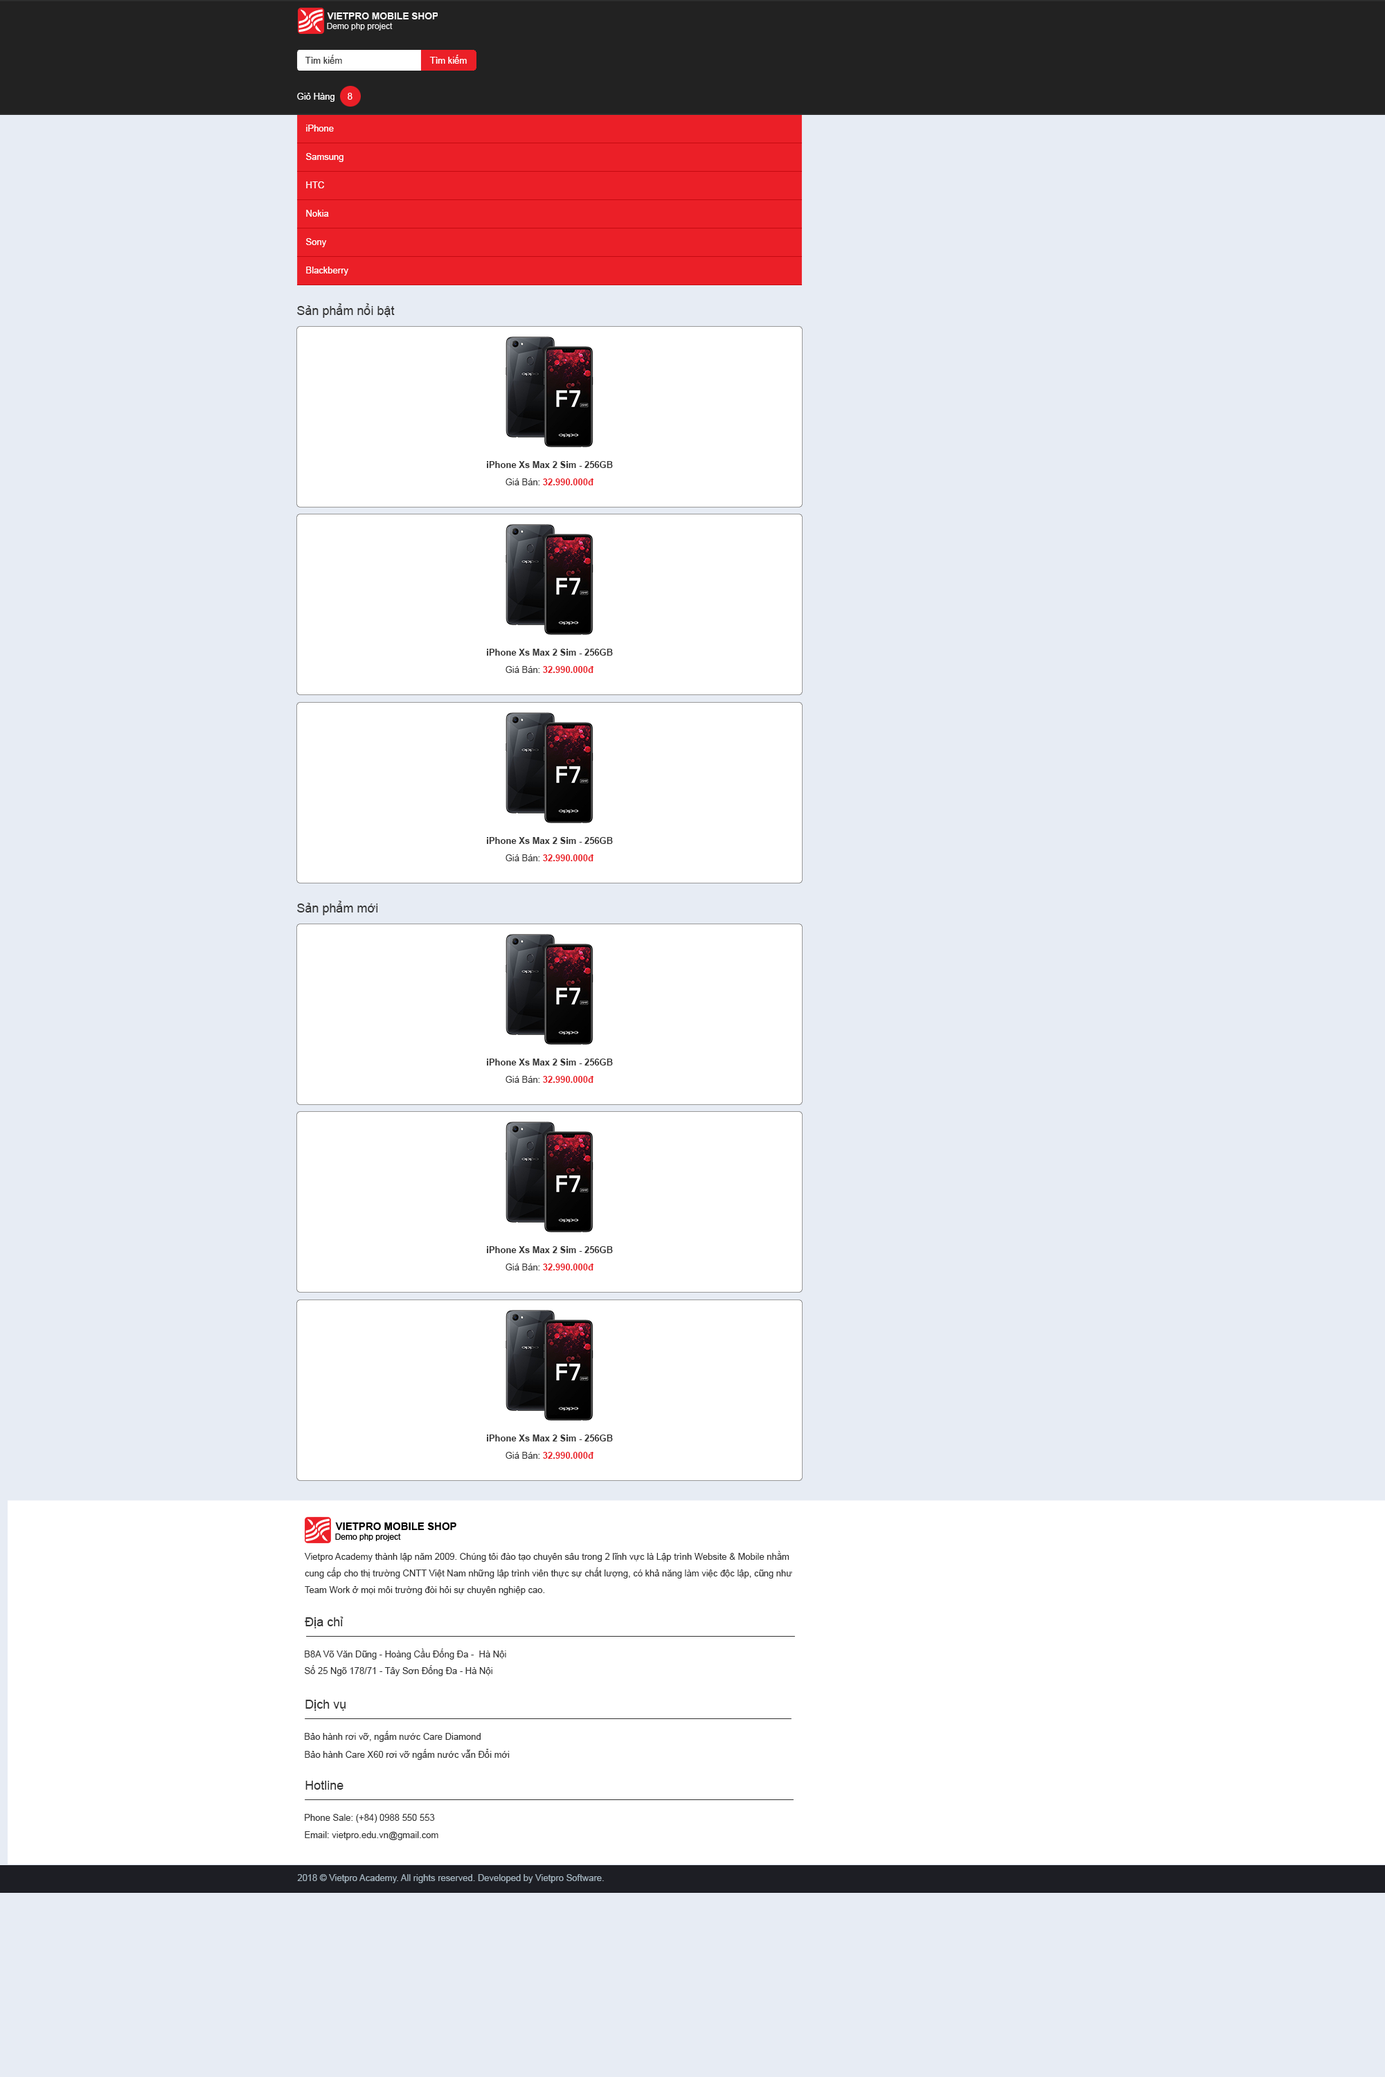
<style>
.page{position:relative;width:1385px;height:2077px;background:#e7ecf4}
.page>*{position:absolute;margin:0}
.t1{font:9px "ArialMT";color:#333333}
.t2{font:9px "ArialMT";color:#ffffff}
.t3{font:12.5px "ArialMT";color:#333333}
.t4{font:9px "Arial-BoldMT";color:#333333}
.t5{font:9px "Arial-BoldMT";color:#eb1f27}
.t6{font:9px/16.6px "ArialMT";color:#333333}
.t7{font:9px "ArialMT";color:#a1b1bc}
</style>
<div class="page">
<p class="t1" style="left:305px;top:55px;width:37px;height:9px">Tìm kiếm</p>
<p class="t2" style="left:429px;top:55px;width:38px;height:9px">Tìm kiếm</p>
<p class="t2" style="left:297px;top:93px;width:55px;height:9px">Giỏ Hàng     8</p>
<p class="t2" style="left:306px;top:125px;width:28px;height:7px">iPhone</p>
<p class="t2" style="left:306px;top:153px;width:37px;height:9px">Samsung</p>
<p class="t2" style="left:306px;top:181px;width:18px;height:7px">HTC</p>
<p class="t2" style="left:306px;top:210px;width:23px;height:7px">Nokia</p>
<p class="t2" style="left:306px;top:238px;width:21px;height:9px">Sony</p>
<p class="t2" style="left:306px;top:267px;width:42px;height:9px">Blackberry</p>
<p class="t3" style="left:297px;top:303px;width:98px;height:15px">Sản phẩm nổi bật</p>
<p class="t4" style="left:487px;top:461px;width:126px;height:7px">iPhone Xs Max 2 Sim - 256GB</p>
<p class="t5" style="left:505px;top:478px;width:88px;height:7px"><span class="t1">Giá Bán: </span>32.990.000đ</p>
<p class="t4" style="left:487px;top:649px;width:126px;height:7px">iPhone Xs Max 2 Sim - 256GB</p>
<p class="t5" style="left:505px;top:666px;width:88px;height:7px"><span class="t1">Giá Bán: </span>32.990.000đ</p>
<p class="t4" style="left:487px;top:837px;width:126px;height:7px">iPhone Xs Max 2 Sim - 256GB</p>
<p class="t5" style="left:505px;top:854px;width:88px;height:7px"><span class="t1">Giá Bán: </span>32.990.000đ</p>
<p class="t3" style="left:297px;top:901px;width:81px;height:14px">Sản phẩm mới</p>
<p class="t4" style="left:487px;top:1059px;width:126px;height:6px">iPhone Xs Max 2 Sim - 256GB</p>
<p class="t5" style="left:505px;top:1076px;width:88px;height:7px"><span class="t1">Giá Bán: </span>32.990.000đ</p>
<p class="t4" style="left:487px;top:1246px;width:126px;height:7px">iPhone Xs Max 2 Sim - 256GB</p>
<p class="t5" style="left:505px;top:1263px;width:88px;height:7px"><span class="t1">Giá Bán: </span>32.990.000đ</p>
<p class="t4" style="left:487px;top:1434px;width:126px;height:7px">iPhone Xs Max 2 Sim - 256GB</p>
<p class="t5" style="left:505px;top:1452px;width:88px;height:7px"><span class="t1">Giá Bán: </span>32.990.000đ</p>
<p class="t6" style="left:304px;top:1551px;width:488px;height:44px">Vietpro Academy thành lập năm 2009. Chúng tôi đào tạo chuyên sâu trong 2 lĩnh vực là Lập trình Website &amp; Mobile nhằm <br>cung cấp cho thị trường CNTT Việt Nam những lập trình viên thực sự chất lượng, có khả năng làm việc độc lập, cũng như <br>Team Work ở mọi môi trường đòi hỏi sự chuyên nghiệp cao.</p>
<p class="t3" style="left:305px;top:1617px;width:38px;height:11px">Địa chỉ</p>
<p class="t1" style="left:305px;top:1648px;width:201px;height:11px">B8A Võ Văn Dũng - Hoàng Cầu Đống Đa -  Hà Nội</p>
<p class="t1" style="left:305px;top:1665px;width:187px;height:11px">Số 25 Ngõ 178/71 - Tây Sơn Đống Đa - Hà Nội</p>
<p class="t3" style="left:305px;top:1700px;width:40px;height:11px">Dịch vụ</p>
<p class="t1" style="left:305px;top:1731px;width:175px;height:11px">Bảo hành rơi vỡ, ngấm nước Care Diamond</p>
<p class="t1" style="left:305px;top:1749px;width:205px;height:11px">Bảo hành Care X60 rơi vỡ ngấm nước vẫn Đổi mới</p>
<p class="t3" style="left:305px;top:1781px;width:38px;height:9px">Hotline</p>
<p class="t1" style="left:305px;top:1814px;width:130px;height:9px">Phone Sale: (+84) 0988 550 553</p>
<p class="t1" style="left:305px;top:1831px;width:133px;height:9px">Email: vietpro.edu.vn@gmail.com</p>
<p class="t7" style="left:297px;top:1874px;width:307px;height:9px">2018 © Vietpro Academy. All rights reserved. Developed by Vietpro Software.</p>
</div>
